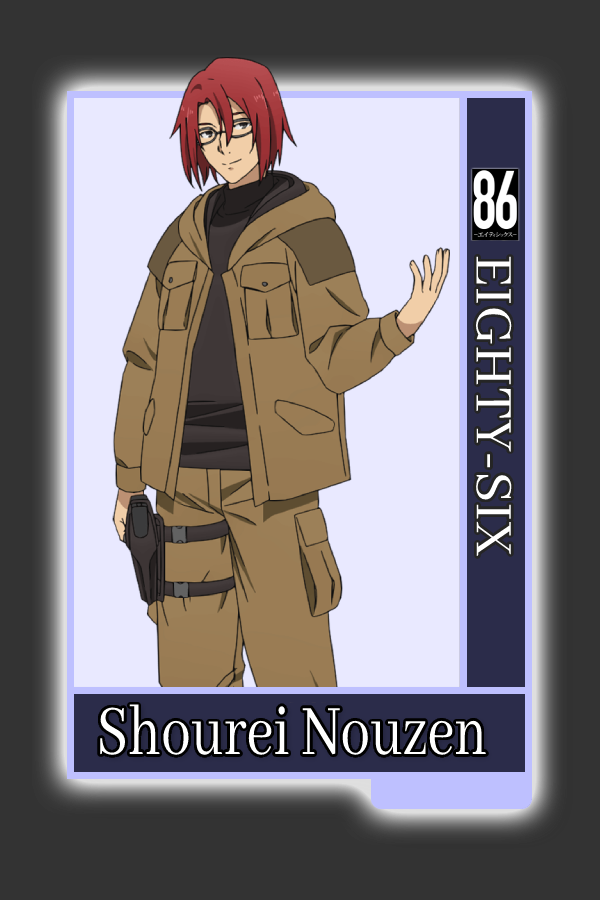
<style>
.page{position:relative;width:600px;height:900px;background:#333333}
.page>*{position:absolute;margin:0}
.t1{font:58.2px "AbhayaLibre-Regular";color:#ffffff}
.t2{font:78.1px "AbhayaLibre-Regular";color:#ffffff;scale:0.76 1}
</style>
<div class="page">
<p class="t1" style="left:476px;top:256px;width:36px;height:300px;rotate:90deg">EIGHTY-SIX</p>
<p class="t2" style="left:100px;top:704px;width:386px;height:51px">Shourei Nouzen</p>
</div>
